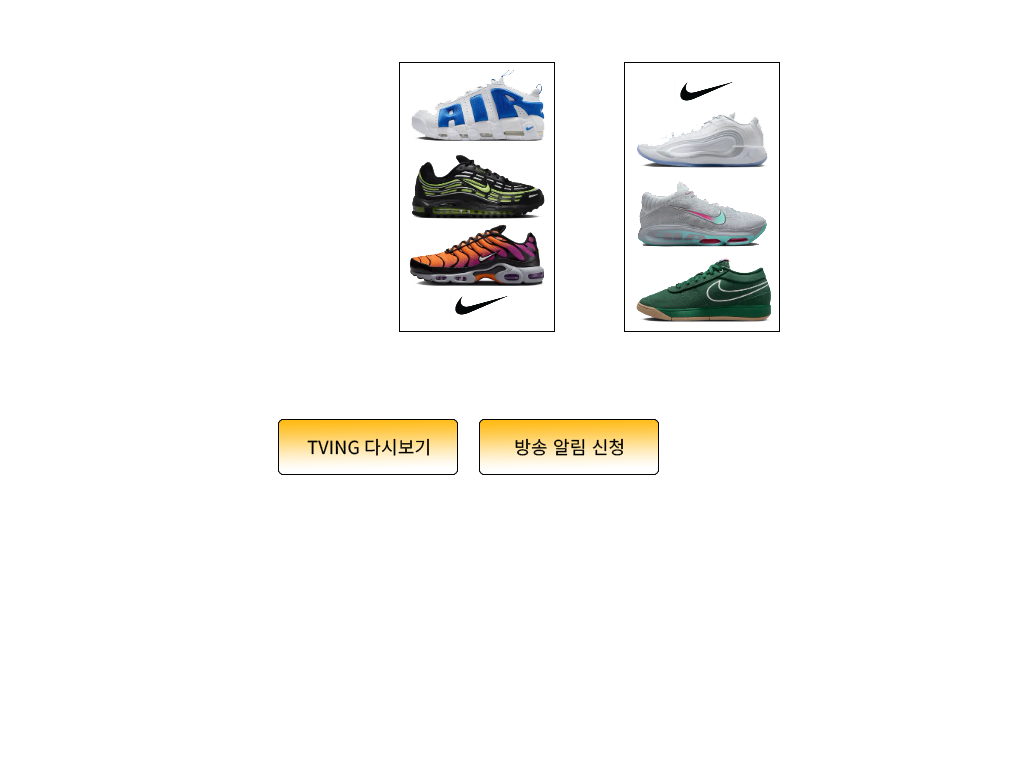
<style>
.page{position:relative;width:1024px;height:768px;background:#ffffff}
.page>*{position:absolute;margin:0}
.t1{font:18px "NotoSansKR-Regular";letter-spacing:0.01em;color:#000000}
</style>
<div class="page">
<p class="t1" style="left:307px;top:438px;width:122px;height:18px">TVING 다시보기</p>
<p class="t1" style="left:515px;top:438px;width:108px;height:18px">방송 알림 신청</p>
</div>
